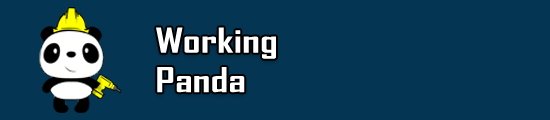
<style>
.page{position:relative;width:550px;height:120px;background:#043654}
.page>*{position:absolute;margin:0}
.t1{font:32.9px "AgencyFB-Bold";color:#ffffff;scale:1.33 1}
</style>
<div class="page">
<p class="t1" style="left:156px;top:27px;width:120px;height:66px">Working <br>Panda</p>
</div>
